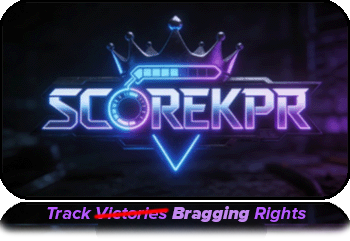
<style>
.page{position:relative;width:350px;height:241px}
.page>*{position:absolute;margin:0}
.t1{font:18px "ProximaNovaA-BoldIt";color:#b65afe}
.t2{font:18px "ProximaNovaA-BlackIt";color:#c289ee}
</style>
<div class="page">
<p class="t1" style="left:47px;top:206px;width:259px;height:16px">Track Victories <span class="t2">Bragging</span> Rights</p>
</div>
